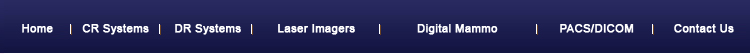
<style>
.page{position:relative;width:750px;height:54px}
.page>*{position:absolute;margin:0}
.t1{font:11px "ArialMT";letter-spacing:0.025em;color:#ffffff;font-weight:bold}
</style>
<div class="page">
<p class="t1" style="left:22px;top:24px;width:712px;height:11px">Home        CR Systems       DR Systems          Laser Imagers                 Digital Mammo                 PACS/DICOM           Contact Us</p>
</div>
